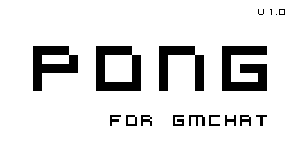
<style>
.page{position:relative;width:300px;height:150px;background:#ffffff}
.page>*{position:absolute;margin:0}
.t1{font:10px "VirtualDJ";color:#000000}
.t2{font:72px "VirtualDJ";color:#000000}
.t3{font:18px "VirtualDJ";color:#000000}
</style>
<div class="page">
<p class="t1" style="left:258px;top:9px;width:27px;height:6px">V1.0</p>
<p class="t2" style="left:33px;top:46px;width:234px;height:45px">PONG</p>
<p class="t3" style="left:110px;top:115px;width:157px;height:11px">for GMCHat</p>
</div>
